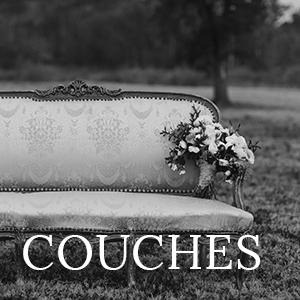
<style>
.page{position:relative;width:300px;height:300px}
.page>*{position:absolute;margin:0}
.t1{font:47.6px "Lora-Regular";letter-spacing:0.025em;color:#ffffff}
</style>
<div class="page">
<p class="t1" style="left:23px;top:235px;width:238px;height:35px">COUCHES</p>
</div>
